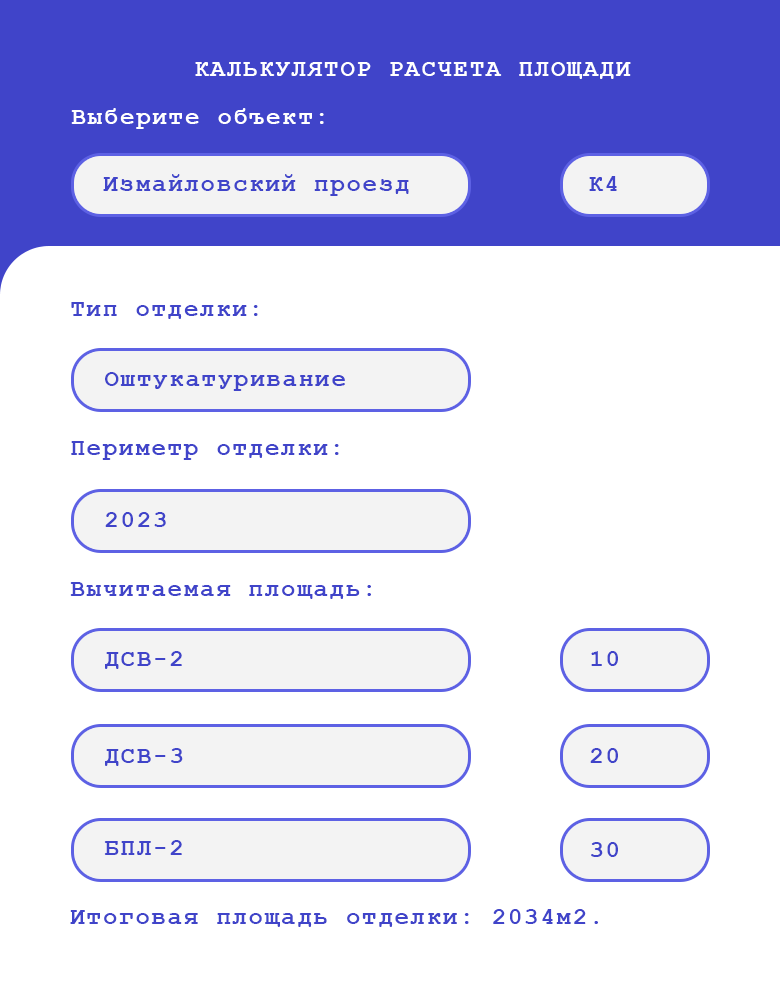
<style>
.page{position:relative;width:780px;height:1000px;background:#ffffff}
.page>*{position:absolute;margin:0}
.t1{font:24px "CourierNewPS-BoldMT";letter-spacing:0.075em;color:#ffffff}
.t2{font:24px "CourierNewPS-BoldMT";letter-spacing:0.075em;color:#4044c9}
</style>
<div class="page">
<p class="t1" style="left:195px;top:62px;width:436px;height:17px">КАЛЬКУЛЯТОР РАСЧЕТА ПЛОЩАДИ</p>
<p class="t1" style="left:71px;top:108px;width:253px;height:21px">Выберите объект:</p>
<p class="t2" style="left:103px;top:174px;width:306px;height:22px">Измайловский проезд</p>
<p class="t2" style="left:589px;top:176px;width:28px;height:15px">К4</p>
<p class="t2" style="left:71px;top:302px;width:187px;height:17px">Тип отделки:</p>
<p class="t2" style="left:105px;top:372px;width:240px;height:19px">Оштукатуривание</p>
<p class="t2" style="left:71px;top:441px;width:268px;height:19px">Периметр отделки:</p>
<p class="t2" style="left:105px;top:512px;width:61px;height:15px">2023</p>
<p class="t2" style="left:70px;top:582px;width:301px;height:17px">Вычитаемая площадь:</p>
<p class="t2" style="left:105px;top:651px;width:77px;height:18px">ДСВ-2</p>
<p class="t2" style="left:591px;top:651px;width:27px;height:15px">10</p>
<p class="t2" style="left:105px;top:748px;width:78px;height:18px">ДСВ-3</p>
<p class="t2" style="left:590px;top:748px;width:28px;height:15px">20</p>
<p class="t2" style="left:104px;top:840px;width:78px;height:15px">БПЛ-2</p>
<p class="t2" style="left:591px;top:842px;width:27px;height:15px">30</p>
<p class="t2" style="left:70px;top:909px;width:528px;height:18px">Итоговая площадь отделки: 2034м2.</p>
</div>
